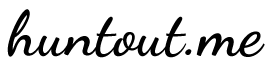
<style>
.page{position:relative;width:270px;height:65px;background:#ffffff}
.page>*{position:absolute;margin:0}
.t1{font:63px "DancingScript-Bold";color:#000000}
</style>
<div class="page">
<p class="t1" style="left:7px;top:9px;width:258px;height:49px">huntout.me</p>
</div>
